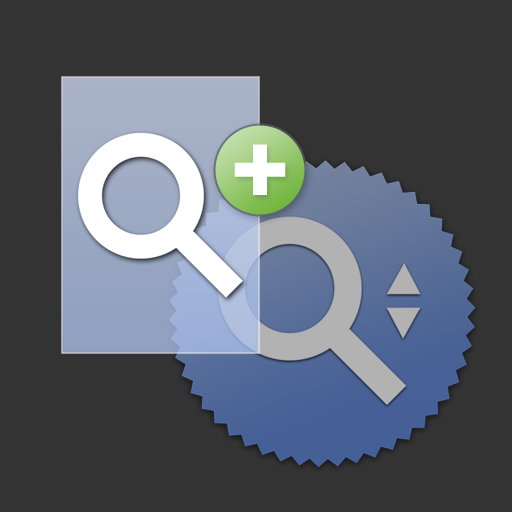
<style>
.page{position:relative;width:512px;height:512px;background:#333333}
.page>*{position:absolute;margin:0}
.t1{font:100px "HelveticaNeue-CondensedBlack";letter-spacing:-0.06em;color:#ffffff}
</style>
<div class="page">
<p class="t1" style="left:234px;top:144px;width:52px;height:51px">+</p>
</div>
